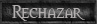
<style>
.page{position:relative;width:97px;height:24px}
.page>*{position:absolute;margin:0}
.t1{font:17.1px "Morpheus";color:#b3b0b0}
</style>
<div class="page">
<p class="t1" style="left:12px;top:5px;width:73px;height:16px">Rechazar</p>
</div>
